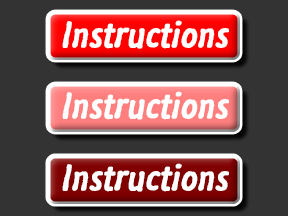
<style>
.page{position:relative;width:288px;height:216px;background:#333333}
.page>*{position:absolute;margin:0}
.t1{font:36.8px "SegoeMarker";color:#ffffff;font-weight:bold;font-style:italic}
</style>
<div class="page">
<p class="t1" style="left:62px;top:20px;width:167px;height:29px">Instructions</p>
</div>
